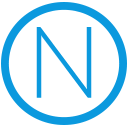
<style>
.page{position:relative;width:128px;height:128px;background:#ffffff}
.page>*{position:absolute;margin:0}
.t1{font:100px "Lato-Light";letter-spacing:0.05em;color:#0b99de}
</style>
<div class="page">
<p class="t1" style="left:36px;top:27px;width:56px;height:71px">N</p>
</div>
